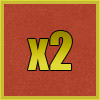
<style>
.page{position:relative;width:100px;height:100px}
.page>*{position:absolute;margin:0}
.t1{font:48px "Impact"}
</style>
<div class="page">
<p class="t1" style="left:28px;top:31px;width:44px;height:39px">x2</p>
</div>
